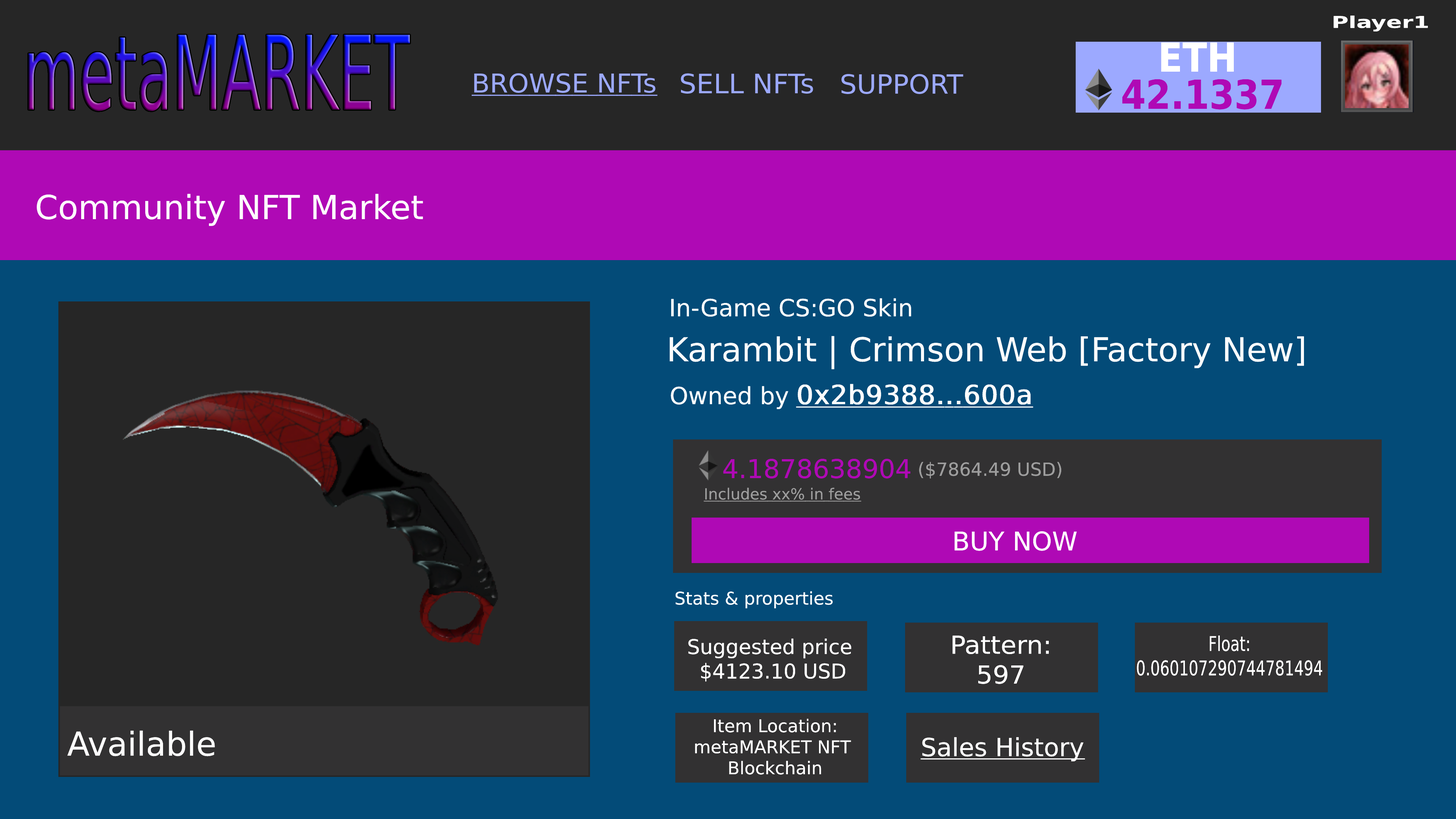
<style>
.page{position:relative;width:1456px;height:819px;background:#262626}
.page>*{position:absolute;margin:0}
.t1{font:16.3px "DejaVuSansCondensed-Bold";color:#ffffff;scale:1.58 1}
.t2{font:102.6px "DejaVuSans";scale:0.56 1}
.t3{font:39.9px "DejaVuSansCondensed-Bold";color:#ffffff}
.t4{font:26px "DejaVuSans";color:#9ca9ff;text-decoration:underline}
.t5{font:26.8px "DejaVuSans";color:#9ca9ff}
.t6{font:26.5px "DejaVuSans";color:#9ca9ff}
.t7{font:39.9px "DejaVuSansCondensed-Bold";color:#af09b5}
.t8{font:33px "DejaVuSans";color:#fcfcfc}
.t9{font:23.7px "DejaVuSans";color:#fcfcfc}
.t10{font:26.5px "DejaVuSans";color:#fcfcfc;font-weight:bold;text-decoration:underline}
.t11{font:25.9px "DejaVuSans";color:#af09b5}
.t12{font:18.1px "DejaVuSans";color:#9d9d9d}
.t13{font:15.3px "DejaVuSans";color:#9d9d9d;text-decoration:underline}
.t14{font:25.7px "DejaVuSans";color:#ffffff}
.t15{font:17.5px "DejaVuSans";color:#ffffff}
.t16{font:20.3px "DejaVuSans";color:#ffffff}
.t17{font:24.8px "DejaVuSans";color:#ffffff;scale:1.04 1}
.t18{font:20.3px "DejaVuSans";color:#ffffff;scale:0.74 1}
.t19{font:25px "DejaVuSans";color:#ffffff;text-decoration:underline}
</style>
<div class="page">
<p class="t1" style="left:1334px;top:16px;width:94px;height:15px">Player1</p>
<p class="t2" style="left:28px;top:35px;width:382px;height:76px">metaMARKET</p>
<p class="t3" style="left:1161px;top:42px;width:73px;height:30px">ETH</p>
<p class="t4" style="left:472px;top:73px;width:185px;height:23px">BROWSE NFTs</p>
<p class="t5" style="left:681px;top:73px;width:132px;height:21px">SELL NFTs</p>
<p class="t6" style="left:841px;top:74px;width:122px;height:20px">SUPPORT</p>
<p class="t7" style="left:1122px;top:79px;width:160px;height:31px">42.1337</p>
<p class="t8" style="left:37px;top:194px;width:386px;height:32px">Community NFT Market</p>
<p class="t9" style="left:671px;top:298px;width:240px;height:19px">In-Game CS:GO Skin</p>
<p class="t8" style="left:670px;top:336px;width:634px;height:33px">Karambit | Crimson Web [Factory New]</p>
<p class="t10" style="left:671px;top:384px;width:362px;height:25px"><span class="t9">Owned by </span>0x2b9388...600a</p>
<p class="t11" style="left:723px;top:459px;width:187px;height:20px">4.1878638904</p>
<p class="t12" style="left:919px;top:462px;width:142px;height:17px">($7864.49 USD)</p>
<p class="t13" style="left:704px;top:488px;width:157px;height:14px">Includes xx% in fees</p>
<p class="t14" style="left:954px;top:531px;width:123px;height:20px">BUY NOW</p>
<p class="t15" style="left:675px;top:591px;width:158px;height:18px">Stats &amp; properties</p>
<p class="t16" style="left:688px;top:639px;width:163px;height:43px;text-align:center">Suggested price <br>$4123.10 USD</p>
<p class="t17" style="left:952px;top:635px;width:97px;height:49px;text-align:center">Pattern:<br>597</p>
<p class="t18" style="left:1137px;top:635px;width:185px;height:41px;text-align:center">Float:<br>0.060107290744781494</p>
<p class="t15" style="left:695px;top:719px;width:156px;height:56px;text-align:center">Item Location:<br>metaMARKET NFT <br>Blockchain</p>
<p class="t8" style="left:67px;top:730px;width:148px;height:26px">Available</p>
<p class="t19" style="left:921px;top:737px;width:164px;height:24px">Sales History</p>
</div>
